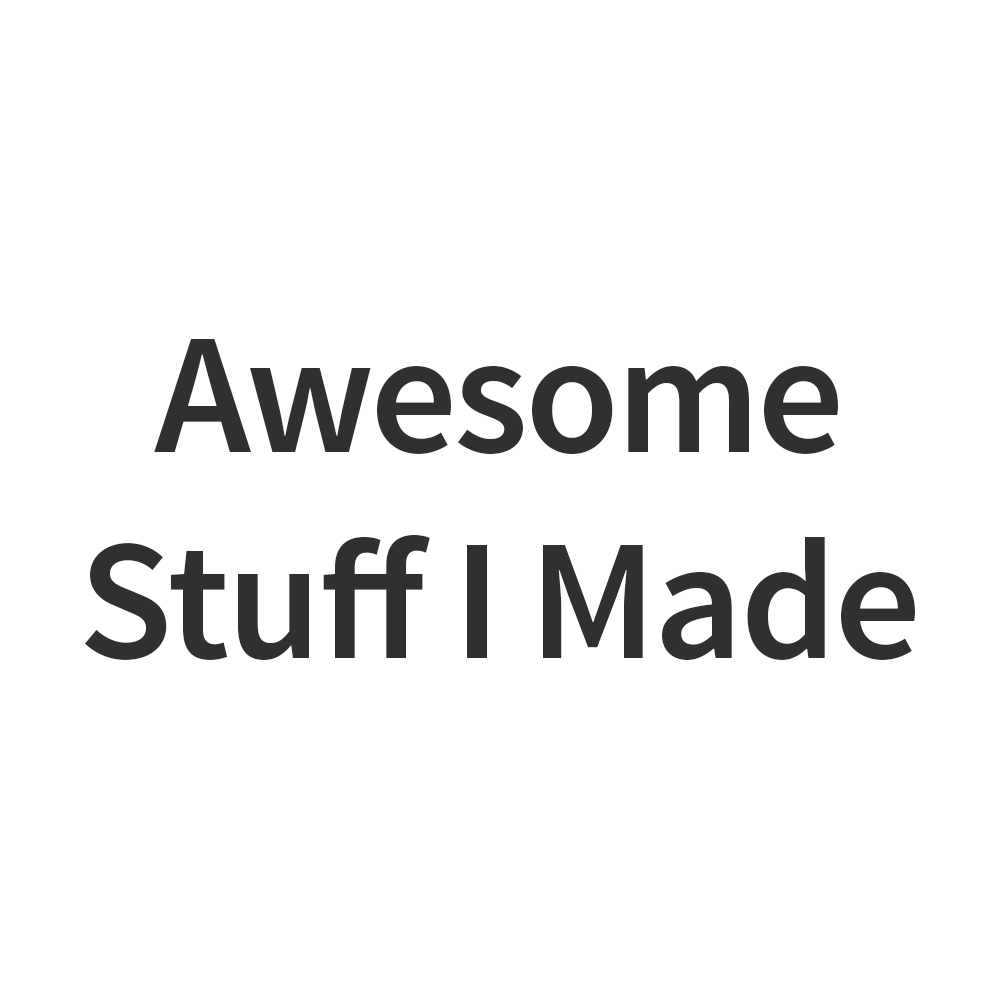
<style>
.page{position:relative;width:1000px;height:1000px;background:#ffffff}
.page>*{position:absolute;margin:0}
.t1{font:172px "SourceSansPro-Semibold";letter-spacing:-0.02em;color:#303030}
</style>
<div class="page">
<p class="t1" style="left:85px;top:339px;width:830px;height:321px;text-align:center">Awesome<br>Stuff I Made</p>
</div>
